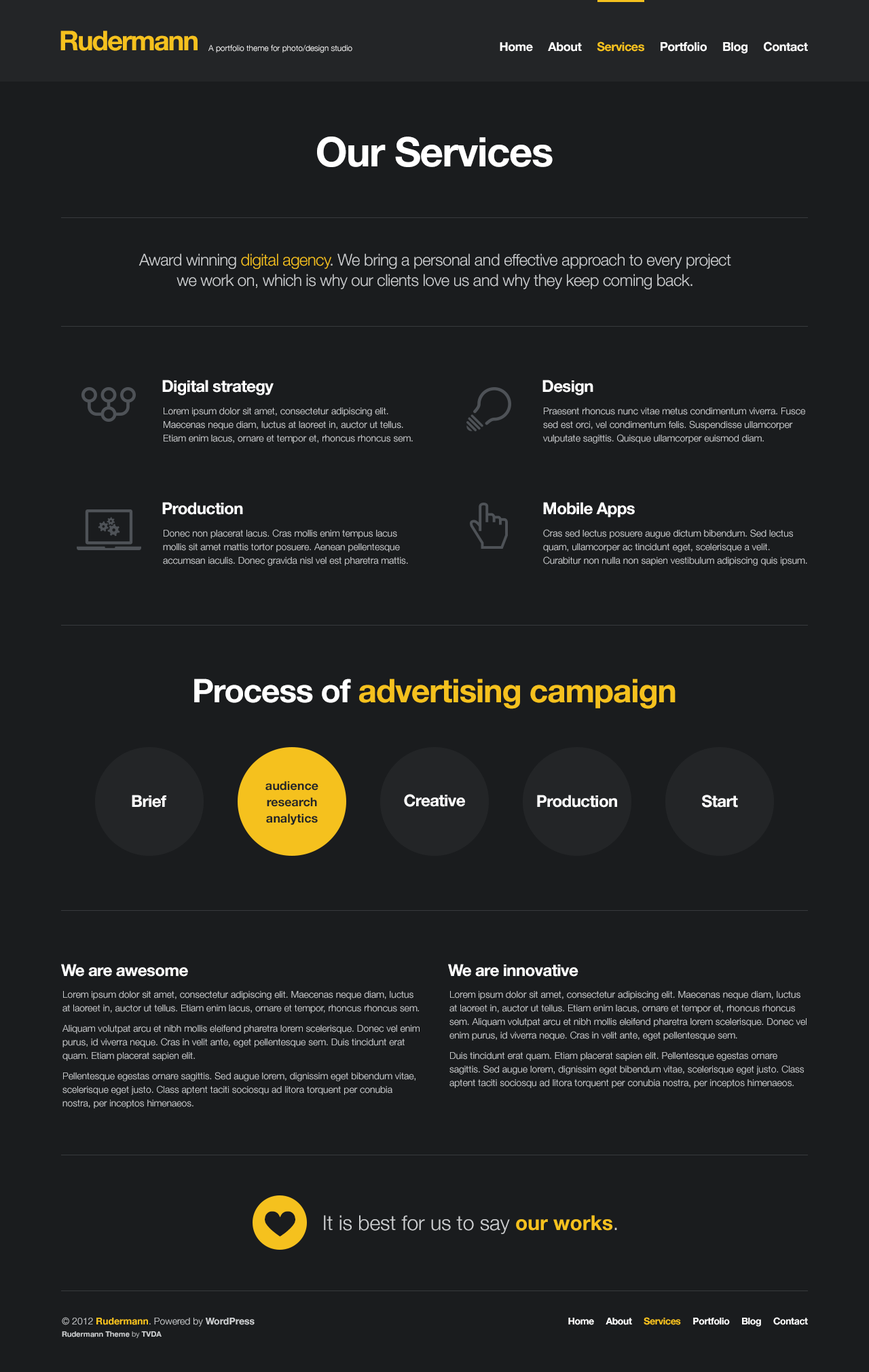
<style>
.page{position:relative;width:869px;height:1372px;background:#1a1c1e}
.page>*{position:absolute;margin:0}
.t1{font:27.2px "HelveticaNeue-Bold";letter-spacing:-0.05em;color:#f5c11e}
.t2{font:12.2px "HelveticaNeue-Bold";letter-spacing:-0.025em;color:#ffffff}
.t3{font:12.2px "HelveticaNeue-Bold";letter-spacing:-0.025em;color:#f5c11e}
.t4{font:8.1px "HelveticaNeue-Light";color:#ffffff}
.t5{font:40.7px "HelveticaNeue-Bold";letter-spacing:-0.025em;color:#ffffff}
.t6{font:16.3px/20.4px "HelveticaNeue-Light";letter-spacing:-0.025em;color:#ccced0}
.t7{font:16.3px/20.4px "HelveticaNeue-Light";letter-spacing:-0.025em;color:#f5c11e}
.t8{font:16.3px "HelveticaNeue-Bold";letter-spacing:-0.025em;color:#ffffff}
.t9{font:9.5px/13.6px "HelveticaNeue-Light";color:#ccced0}
.t10{font:32.6px "HelveticaNeue-Bold";letter-spacing:-0.025em;color:#f5c11e}
.t11{font:32.6px "HelveticaNeue-Bold";letter-spacing:-0.025em;color:#ffffff}
.t12{font:12.2px/16.3px "HelveticaNeue-Bold";color:#232527}
.t13{font:9.5px/20.4px "HelveticaNeue-Light";color:#ccced0}
.t14{font:20.4px "HelveticaNeue-Light";color:#ccced0}
.t15{font:20.4px "HelveticaNeue-Bold";color:#f5c11e}
.t16{font:7.5px/12.2px "HelveticaNeue-Bold";color:#ccced0}
.t17{font:9.5px/12.2px "HelveticaNeue-Light";color:#ccced0}
.t18{font:9.5px/12.2px "HelveticaNeue-Bold";color:#f5c11e}
.t19{font:9.5px/12.2px "HelveticaNeue-Bold";color:#ccced0}
.t20{font:7.5px/12.2px "HelveticaNeue-Light";color:#ccced0}
.t21{font:9.5px "HelveticaNeue-Bold";letter-spacing:-0.025em;color:#ffffff}
.t22{font:9.5px "HelveticaNeue-Bold";letter-spacing:-0.025em;color:#f5c11e}
</style>
<div class="page">
<p class="t1" style="left:60px;top:31px;width:138px;height:20px">Rudermann</p>
<p class="t2" style="left:500px;top:41px;width:308px;height:13px">Home     About     <span class="t3">Services</span>     Portfolio     Blog     Contact</p>
<p class="t4" style="left:208px;top:45px;width:144px;height:8px">A portfolio theme for photo/design studio</p>
<p class="t5" style="left:317px;top:136px;width:236px;height:31px">Our Services</p>
<p class="t6" style="left:139px;top:253px;width:592px;height:36px;text-align:center">Award winning <span class="t7">digital agency</span>. We bring a personal and effective approach to every project<br>we work on, which is why our clients love us and why they keep coming back.</p>
<p class="t8" style="left:162px;top:380px;width:112px;height:15px">Digital strategy</p>
<p class="t8" style="left:543px;top:380px;width:51px;height:15px">Design</p>
<p class="t9" style="left:164px;top:407px;width:249px;height:36px">Lorem ipsum dolor sit amet, consectetur adipiscing elit.<br>Maecenas neque diam, luctus at laoreet in, auctor ut tellus.<br>Etiam enim lacus, ornare et tempor et, rhoncus rhoncus sem.</p>
<p class="t9" style="left:543px;top:407px;width:262px;height:36px">Praesent rhoncus nunc vitae metus condimentum viverra. Fusce<br>sed est orci, vel condimentum felis. Suspendisse ullamcorper<br>vulputate sagittis. Quisque ullamcorper euismod diam.</p>
<p class="t8" style="left:162px;top:502px;width:81px;height:13px">Production</p>
<p class="t8" style="left:543px;top:502px;width:92px;height:15px">Mobile Apps</p>
<p class="t9" style="left:163px;top:529px;width:245px;height:37px">Donec non placerat lacus. Cras mollis enim tempus lacus<br>mollis sit amet mattis tortor posuere. Aenean pellentesque<br>accumsan iaculis. Donec gravida nisl vel est pharetra mattis.</p>
<p class="t9" style="left:543px;top:529px;width:264px;height:37px">Cras sed lectus posuere augue dictum bibendum. Sed lectus<br>quam, ullamcorper ac tincidunt eget, scelerisque a velit.<br>Curabitur non nulla non sapien vestibulum adipiscing quis ipsum.</p>
<p class="t10" style="left:194px;top:678px;width:482px;height:31px"><span class="t11">Process of </span>advertising campaign</p>
<p class="t12" style="left:266px;top:781px;width:52px;height:44px;text-align:center">audience<br>research<br>analytics</p>
<p class="t8" style="left:132px;top:795px;width:34px;height:12px">Brief</p>
<p class="t8" style="left:404px;top:794px;width:61px;height:13px">Creative</p>
<p class="t8" style="left:537px;top:795px;width:80px;height:12px">Production</p>
<p class="t8" style="left:702px;top:795px;width:36px;height:12px">Start</p>
<p class="t8" style="left:61px;top:964px;width:127px;height:13px">We are awesome</p>
<p class="t8" style="left:448px;top:964px;width:131px;height:13px">We are innovative</p>
<p class="t9" style="left:62px;top:991px;width:358px;height:117px">Lorem ipsum dolor sit amet, consectetur adipiscing elit. Maecenas neque diam, luctus at laoreet in, auctor ut tellus. Etiam enim lacus, ornare et tempor, rhoncus rhoncus sem.<br><span class="t13">Aliquam volutpat arcu et nibh mollis eleifend pharetra lorem scelerisque. Donec vel enim </span>purus, id viverra neque. Cras in velit ante, eget pellentesque sem. Duis tincidunt erat quam. Etiam placerat sapien elit.<br><span class="t13">Pellentesque egestas ornare sagittis. Sed augue lorem, dignissim eget bibendum vitae, </span>scelerisque eget justo. Class aptent taciti sociosqu ad litora torquent per conubia nostra, per inceptos himenaeos.</p>
<p class="t9" style="left:450px;top:991px;width:357px;height:97px">Lorem ipsum dolor sit amet, consectetur adipiscing elit. Maecenas neque diam, luctus at laoreet in, auctor ut tellus. Etiam enim lacus, ornare et tempor et, rhoncus rhoncus sem. Aliquam volutpat arcu et nibh mollis eleifend pharetra lorem scelerisque. Donec vel enim purus, id viverra neque. Cras in velit ante, eget pellentesque sem.<br><span class="t13">Duis tincidunt erat quam. Etiam placerat sapien elit. Pellentesque egestas ornare </span>sagittis. Sed augue lorem, dignissim eget bibendum vitae, scelerisque eget justo. Class aptent taciti sociosqu ad litora torquent per conubia nostra, per inceptos himenaeos.</p>
<p class="t14" style="left:324px;top:1215px;width:293px;height:19px">It is best for us to say <span class="t15">our works</span>.</p>
<p class="t16" style="left:62px;top:1317px;width:193px;height:21px"><span class="t17">© 2012 </span><span class="t18">Rudermann</span><span class="t17">. Powered by </span><span class="t19">WordPress<br></span>Rudermann Theme<span class="t20"> by </span>TVDA</p>
<p class="t21" style="left:568px;top:1317px;width:240px;height:9px">Home     About     <span class="t22">Services</span>     Portfolio     Blog     Contact</p>
</div>
